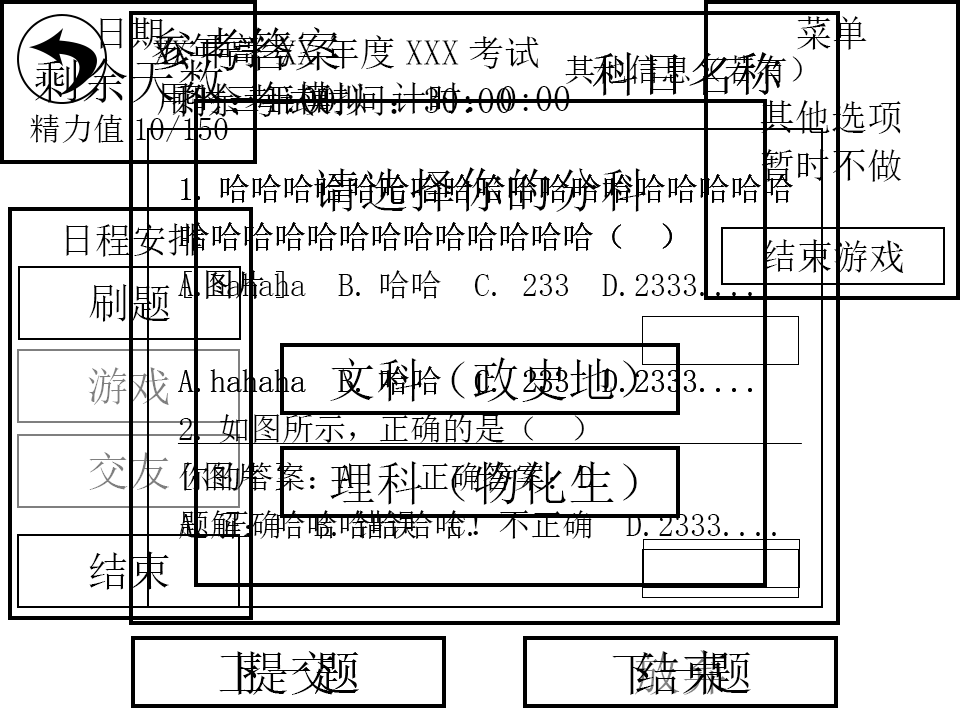
<style>
.page{position:relative;width:960px;height:720px;background:#ffffff}
.page>*{position:absolute;margin:0}
.t1{font:32px/48px "SimSun";color:#000000}
.t2{font:36px/42px "SimSun";color:#000000}
.t3{font:48px/56px "SimSun";color:#000000}
.t4{font:36px "SimSun";color:#000000}
.t5{font:48px "SimSun";color:#000000}
.t6{font:36px/48px "SimSun";color:#000000}
.t7{font:32px "SimSun";color:#000000}
.t8{font:42px "SimSun";color:#000000}
.t9{font:42px "SimSun";color:#7f7f7f}
.t10{font:48px "SimSun"}
</style>
<div class="page">
<p class="t1" style="left:30px;top:17px;width:198px;height:126px;text-align:center"><span class="t2">日期<br></span><span class="t3">剩余天数<br></span>精力值10/150</p>
<p class="t4" style="left:797px;top:16px;width:70px;height:34px">菜单</p>
<p class="t5" style="left:152px;top:27px;width:188px;height:44px">参考答案</p>
<p class="t6" style="left:154px;top:33px;width:212px;height:82px;text-align:center">五年高考<br>        三年模拟</p>
<p class="t6" style="left:154px;top:35px;width:385px;height:82px">XX中学XX年度XXX考试<br> 剩余考试时间：30:00</p>
<p class="t5" style="left:593px;top:52px;width:188px;height:44px">科目名称</p>
<p class="t5" style="left:593px;top:52px;width:188px;height:44px">科目名称</p>
<p class="t7" style="left:565px;top:55px;width:237px;height:29px">其他信息（若有）</p>
<p class="t4" style="left:157px;top:82px;width:178px;height:33px">用时：1:00</p>
<p class="t4" style="left:392px;top:82px;width:178px;height:32px">计时：0:00</p>
<p class="t6" style="left:760px;top:100px;width:142px;height:82px;text-align:center">其他选项<br>暂时不做</p>
<p class="t1" style="left:177px;top:174px;width:625px;height:365px">1.哈哈哈哈哈哈哈哈哈哈哈哈哈哈哈哈哈哈<br>哈哈哈哈哈哈哈哈哈哈哈哈哈（  ）<br>[图片]<br><br>A.hahaha  B.哈哈  C. 233  D.2333....<br>_______________________________________<br>你的答案：A    正确答案：D<br>题解：哈哈哈哈哈哈！</p>
<p class="t1" style="left:178px;top:174px;width:615px;height:221px">1.哈哈哈哈哈哈哈哈哈哈哈哈哈哈哈哈哈哈<br>哈哈哈哈哈哈哈哈哈哈哈哈哈（  ）<br>[图片]<br><br>A.hahaha  B.哈哈  C. 233  D.2333....</p>
<p class="t1" style="left:178px;top:174px;width:615px;height:365px">1.哈哈哈哈哈哈哈哈哈哈哈哈哈哈哈哈哈哈<br>哈哈哈哈哈哈哈哈哈哈哈哈哈（  ）<br>A.hahaha  B.哈哈  C. 233  D.2333....<br><br><br>2.如图所示，正确的是（  ）<br>[图片]<br>A.正确  B.错误  C. 不正确  D.2333....</p>
<p class="t5" style="left:313px;top:167px;width:334px;height:45px">请选择你的分科</p>
<p class="t4" style="left:66px;top:223px;width:136px;height:34px">日程安排</p>
<p class="t4" style="left:763px;top:239px;width:141px;height:34px">结束游戏</p>
<p class="t8" style="left:89px;top:284px;width:81px;height:38px">刷题</p>
<p class="t5" style="left:330px;top:357px;width:307px;height:45px">文科（政史地）</p>
<p class="t9" style="left:88px;top:367px;width:81px;height:38px">游戏</p>
<p class="t9" style="left:89px;top:452px;width:80px;height:38px">交友</p>
<p class="t5" style="left:330px;top:461px;width:307px;height:44px">理科（物化生）</p>
<p class="t8" style="left:89px;top:551px;width:80px;height:39px">结束</p>
<p class="t5" style="left:219px;top:651px;width:140px;height:43px">上一题</p>
<p class="t5" style="left:220px;top:652px;width:139px;height:43px">下一题</p>
<p class="t5" style="left:243px;top:651px;width:92px;height:44px">提交</p>
<p class="t5" style="left:612px;top:652px;width:139px;height:43px">下一题</p>
<p class="t10" style="left:635px;top:650px;width:92px;height:45px">放弃</p>
<p class="t5" style="left:636px;top:650px;width:91px;height:45px">结束</p>
</div>
